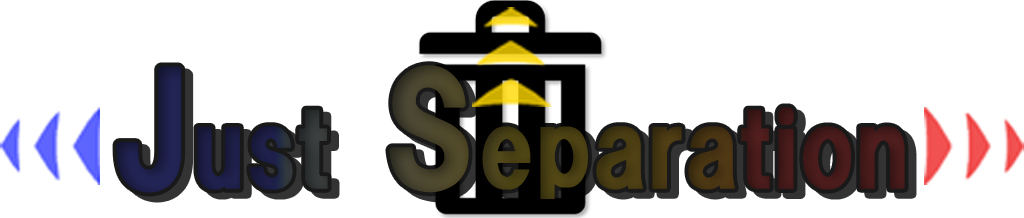
<style>
.page{position:relative;width:1024px;height:218px;background:#ffffff}
.page>*{position:absolute;margin:0}
.t1{font:100px "HGPSoeiKakugothicUB";font-weight:bold}
.t2{font:150px "HGPSoeiKakugothicUB";font-weight:bold}
</style>
<div class="page">
<p class="t1" style="left:116px;top:65px;width:789px;height:134px"><span class="t2">J</span>ust<span class="t2"> S</span>eparation</p>
</div>
